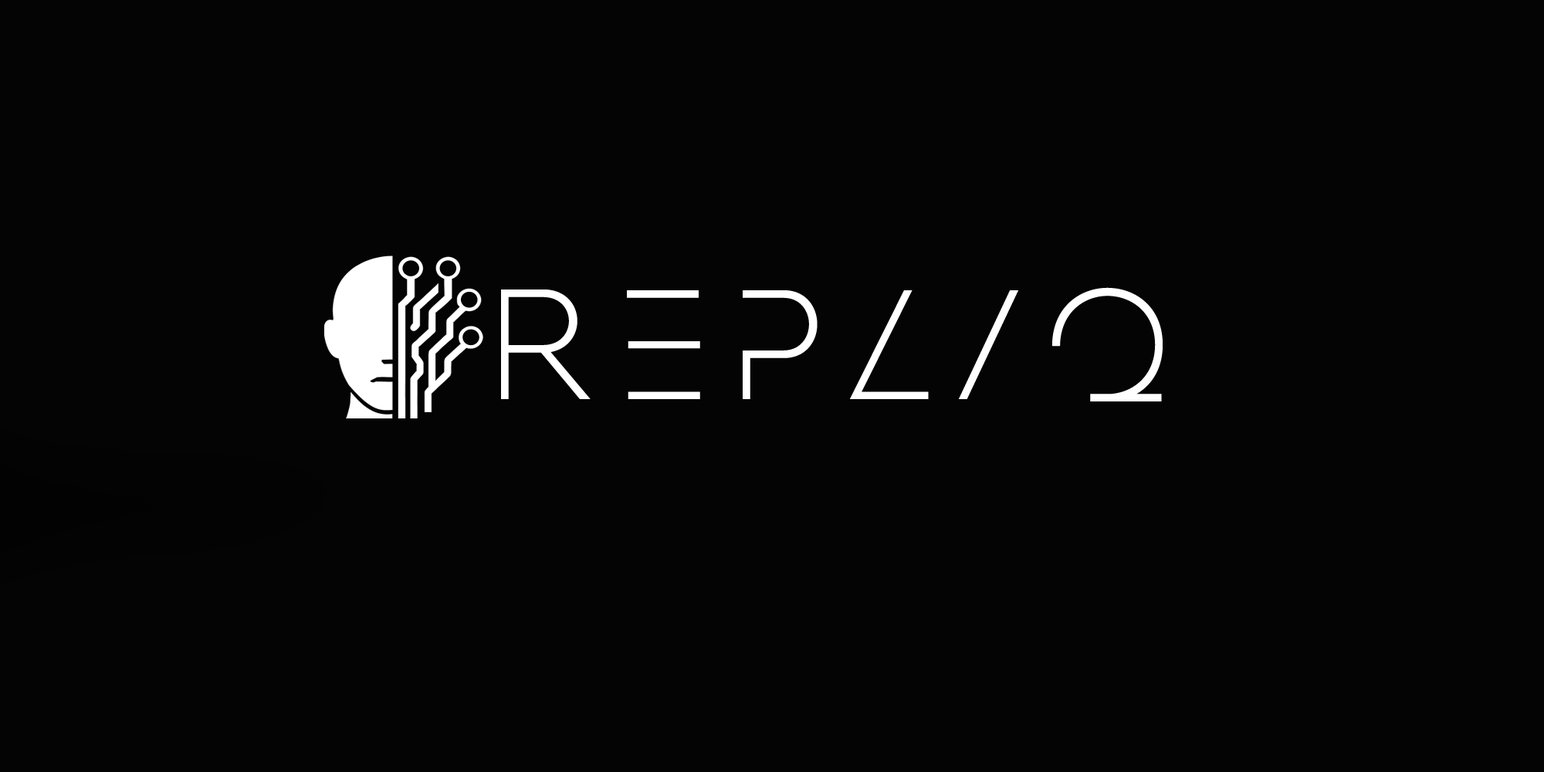
<style>
.page{position:relative;width:1544px;height:772px;background:#040404}
.page>*{position:absolute;margin:0}
.t1{font:156.7px "LightersDEMO";color:#ffffff}
</style>
<div class="page">
<p class="t1" style="left:501px;top:287px;width:662px;height:115px">Repliq</p>
</div>
